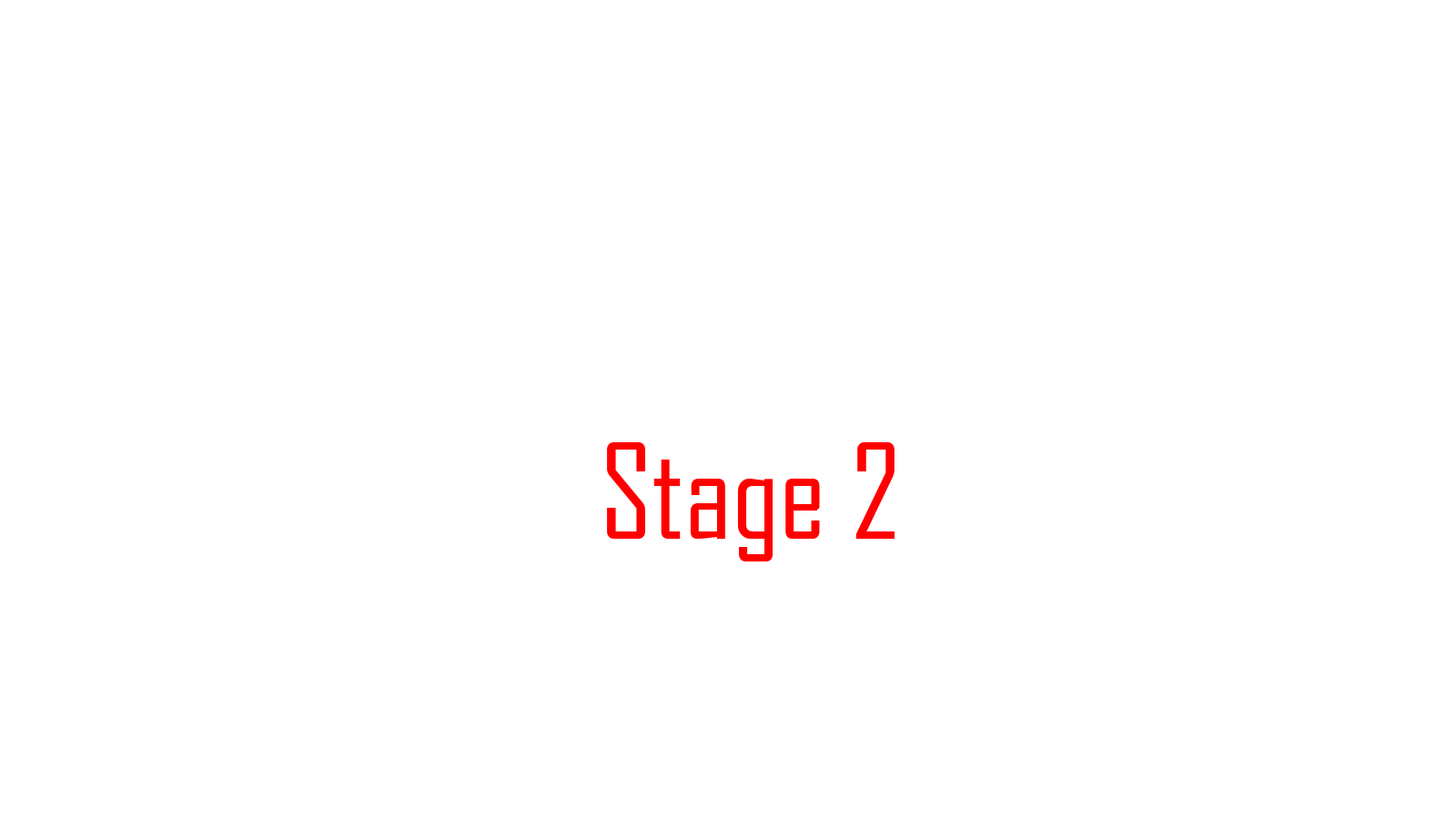
<style>
.page{position:relative;width:1456px;height:819px;background:#ffffff}
.page>*{position:absolute;margin:0}
.t1{font:126.2px "AgencyFB-Reg";color:#ff0000}
</style>
<div class="page">
<p class="t1" style="left:607px;top:442px;width:288px;height:119px">Stage 2</p>
</div>
